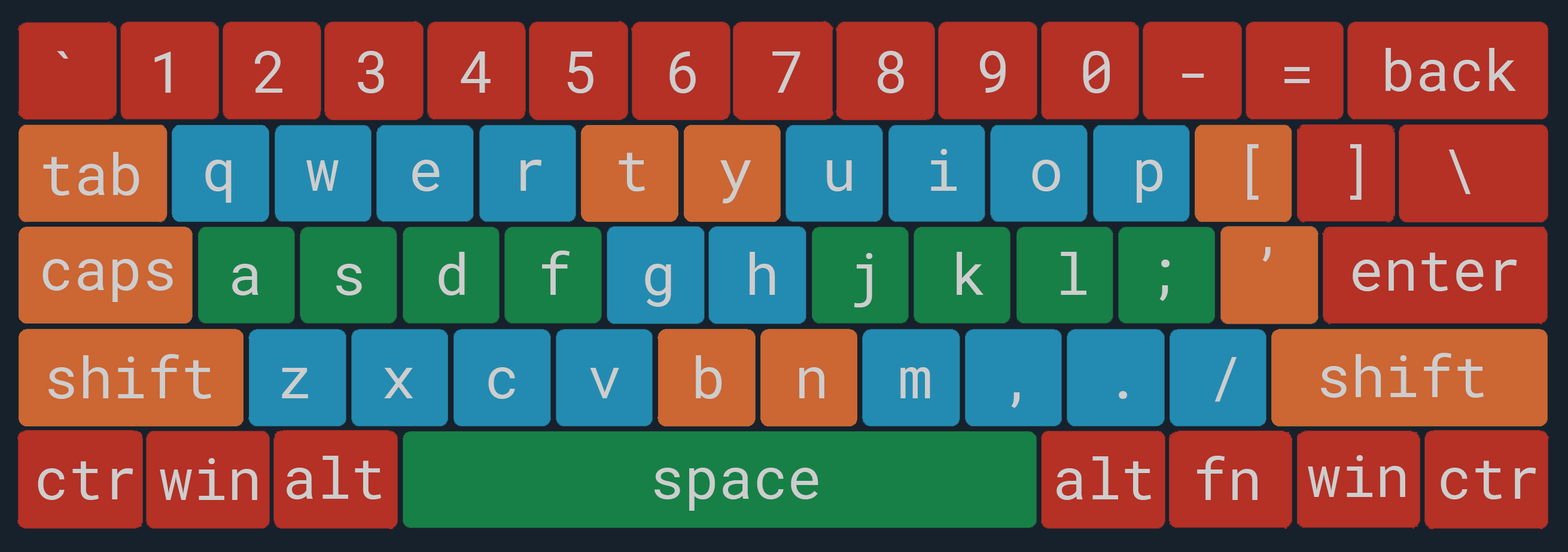
<style>
.page{position:relative;width:1568px;height:552px;background:#b53025}
.page>*{position:absolute;margin:0}
.t1{font:57.4px "RobotoMono-Regular";color:#cdcdcd}
</style>
<div class="page">
<p class="t1" style="left:57px;top:51px;width:1053px;height:42px">`  1  2  3  4  5  6  7  8  9  0</p>
<p class="t1" style="left:1386px;top:48px;width:130px;height:44px">back</p>
<p class="t1" style="left:1182px;top:67px;width:128px;height:16px">-  =</p>
<p class="t1" style="left:205px;top:144px;width:1266px;height:59px">q  w  e  r  t  y  u  i  o  p  [  ]  \</p>
<p class="t1" style="left:43px;top:152px;width:96px;height:44px">tab</p>
<p class="t1" style="left:232px;top:251px;width:854px;height:56px">a  s  d  f  g  h  j  k  l</p>
<p class="t1" style="left:1159px;top:247px;width:112px;height:54px">;  ’</p>
<p class="t1" style="left:1353px;top:252px;width:164px;height:39px">enter</p>
<p class="t1" style="left:42px;top:259px;width:131px;height:43px">caps</p>
<p class="t1" style="left:1321px;top:353px;width:163px;height:45px">shift</p>
<p class="t1" style="left:48px;top:354px;width:163px;height:45px">shift</p>
<p class="t1" style="left:282px;top:355px;width:955px;height:53px">z  x  c  v  b  n  m  ,  .  /</p>
<p class="t1" style="left:38px;top:461px;width:95px;height:39px">ctr</p>
<p class="t1" style="left:160px;top:458px;width:97px;height:42px">win</p>
<p class="t1" style="left:287px;top:456px;width:94px;height:44px">alt</p>
<p class="t1" style="left:1057px;top:456px;width:94px;height:44px">alt</p>
<p class="t1" style="left:1197px;top:456px;width:61px;height:44px">fn</p>
<p class="t1" style="left:1308px;top:455px;width:97px;height:42px">win</p>
<p class="t1" style="left:1441px;top:461px;width:95px;height:39px">ctr</p>
<p class="t1" style="left:654px;top:468px;width:164px;height:43px">space</p>
</div>
